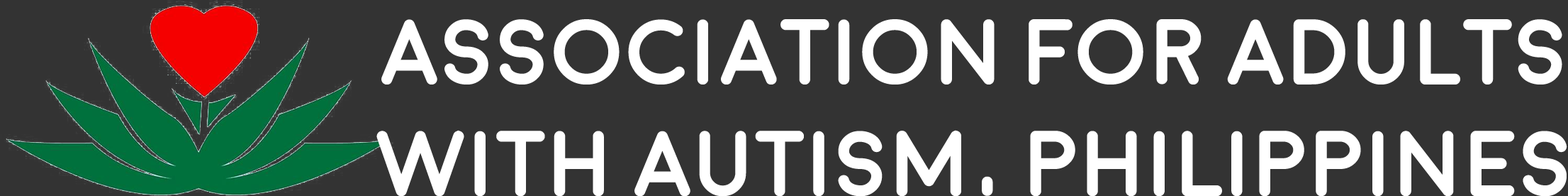
<style>
.page{position:relative;width:1568px;height:196px;background:#333333}
.page>*{position:absolute;margin:0}
.t1{font:92.9px "Moon-Bold";letter-spacing:-0.025em;color:#ffffff}
</style>
<div class="page">
<p class="t1" style="left:376px;top:19px;width:1191px;height:177px;text-align:center">Association For Adults<br>With Autism, Philippines</p>
</div>
